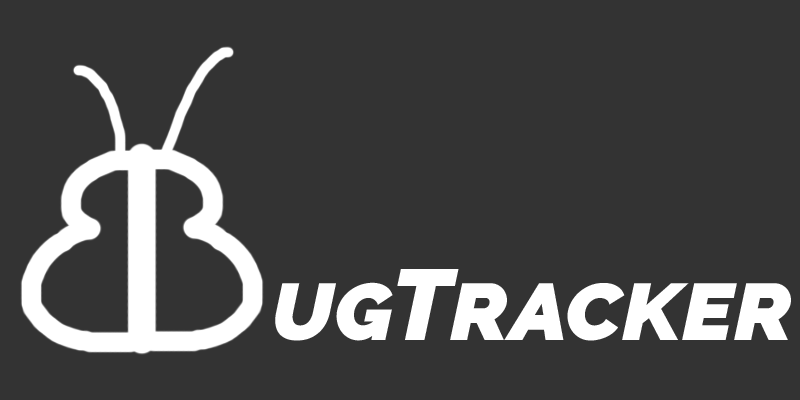
<style>
.page{position:relative;width:800px;height:400px;background:#333333}
.page>*{position:absolute;margin:0}
.t1{font:100px "Raleway-BlackItalic";color:#ffffff;font-variant:small-caps}
</style>
<div class="page">
<p class="t1" style="left:275px;top:269px;width:516px;height:72px">ugTracker</p>
</div>
